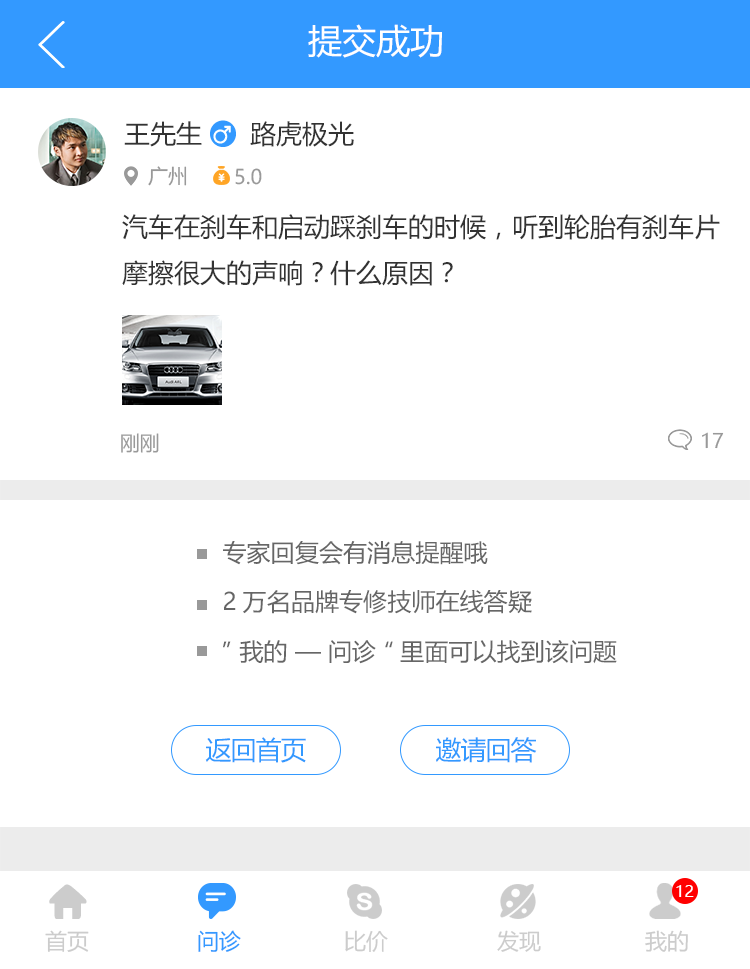
<style>
.page{position:relative;width:750px;height:969px;background:#ffffff}
.page>*{position:absolute;margin:0}
.t1{font:34px "MicrosoftYaHei";color:#ffffff}
.t2{font:26px "MicrosoftYaHei";color:#333333}
.t3{font:20px "MicrosoftYaHei";color:#999999}
.t4{font:24px "MicrosoftYaHei";color:#666666}
.t5{font:26px "MicrosoftYaHei";letter-spacing:-0.04em;color:#3399ff}
.t6{font:16px "MicrosoftYaHei";color:#ffffff}
.t7{font:22px "MicrosoftYaHei";color:#cccccc}
.t8{font:22px "MicrosoftYaHei";color:#3399ff}
</style>
<div class="page">
<p class="t1" style="left:308px;top:24px;width:134px;height:34px">提交成功</p>
<p class="t2" style="left:124px;top:121px;width:78px;height:26px">王先生</p>
<p class="t2" style="left:124px;top:121px;width:78px;height:26px">王先生</p>
<p class="t2" style="left:250px;top:121px;width:104px;height:26px">路虎极光</p>
<p class="t2" style="left:250px;top:121px;width:104px;height:26px">路虎极光</p>
<p class="t3" style="left:148px;top:166px;width:39px;height:20px">广州</p>
<p class="t3" style="left:148px;top:166px;width:39px;height:20px">广州</p>
<p class="t3" style="left:235px;top:168px;width:27px;height:17px">5.0</p>
<p class="t3" style="left:235px;top:168px;width:27px;height:17px">5.0</p>
<p class="t2" style="left:122px;top:214px;width:598px;height:72px">汽车在刹车和启动踩刹车的时候，听到轮胎有刹车片<br>摩擦很大的声响？什么原因？</p>
<p class="t3" style="left:121px;top:433px;width:38px;height:20px">刚刚</p>
<p class="t3" style="left:702px;top:432px;width:22px;height:17px">17</p>
<p class="t3" style="left:702px;top:432px;width:22px;height:17px">17</p>
<p class="t4" style="left:223px;top:540px;width:265px;height:25px">专家回复会有消息提醒哦</p>
<p class="t4" style="left:224px;top:590px;width:308px;height:24px">2万名品牌专修技师在线答疑</p>
<p class="t4" style="left:223px;top:640px;width:394px;height:24px">”我的 — 问诊“里面可以找到该问题</p>
<p class="t5" style="left:205px;top:737px;width:101px;height:26px">返回首页</p>
<p class="t5" style="left:436px;top:737px;width:101px;height:26px">邀请回答</p>
<p class="t6" style="left:676px;top:885px;width:18px;height:12px">12</p>
<p class="t7" style="left:45px;top:930px;width:44px;height:22px">首页</p>
<p class="t8" style="left:198px;top:930px;width:43px;height:22px">问诊</p>
<p class="t7" style="left:345px;top:930px;width:43px;height:22px">比价</p>
<p class="t7" style="left:497px;top:930px;width:44px;height:22px">发现</p>
<p class="t7" style="left:645px;top:930px;width:43px;height:22px">我的</p>
</div>
